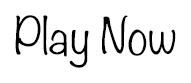
<style>
.page{position:relative;width:191px;height:83px;background:#ffffff}
.page>*{position:absolute;margin:0}
.t1{font:45px "Noteworthy-Light";color:#000000}
</style>
<div class="page">
<p class="t1" style="left:15px;top:15px;width:161px;height:53px">Play Now</p>
</div>
